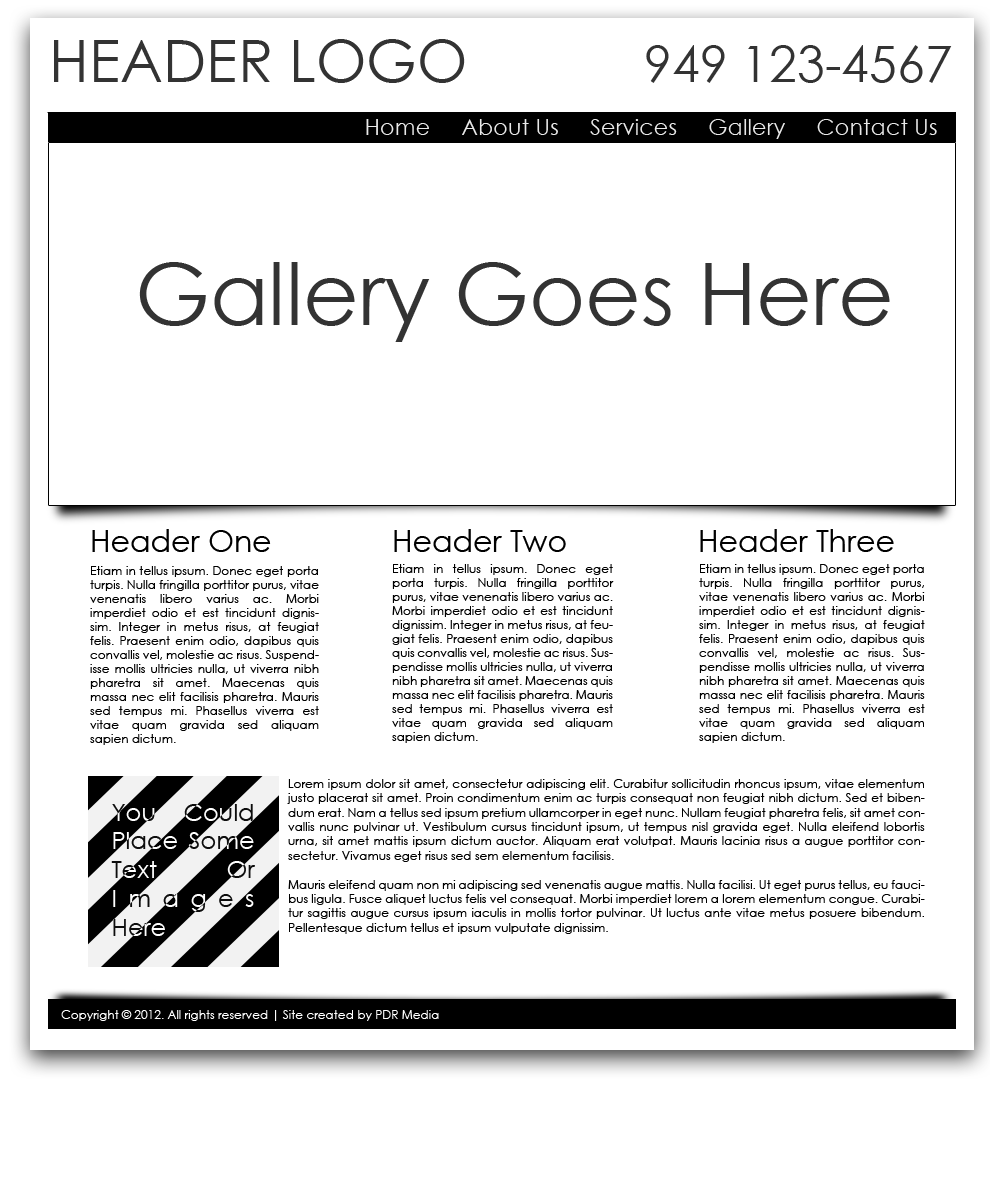
<style>
.page{position:relative;width:990px;height:1200px;background:#ffffff}
.page>*{position:absolute;margin:0}
.t1{font:58.2px "CenturyGothic";color:#333333}
.t2{font:50.1px "CenturyGothic";color:#333333}
.t3{font:22.4px "CenturyGothic";color:#e9e9e9}
.t4{font:85.8px "CenturyGothic";color:#333333}
.t5{font:30px "CenturyGothic";color:#000000}
.t6{font:12px/14px "CenturyGothic";color:#000000}
.t7{font:12px "CenturyGothic";color:#000000}
.t8{font:12px "CenturyGothic";color:#ffffff}
</style>
<div class="page">
<p class="t1" style="left:54px;top:39px;width:411px;height:44px">HEADER LOGO</p>
<p class="t2" style="left:646px;top:45px;width:306px;height:38px">949 123-4567</p>
<p class="t3" style="left:366px;top:119px;width:571px;height:20px">Home     About Us     Services     Gallery     Contact Us</p>
<p class="t4" style="left:139px;top:262px;width:751px;height:80px">Gallery Goes Here</p>
<p class="t5" style="left:92px;top:529px;width:179px;height:23px">Header One</p>
<p class="t5" style="left:394px;top:529px;width:172px;height:23px">Header Two</p>
<p class="t5" style="left:700px;top:529px;width:194px;height:23px">Header Three</p>
<p class="t6" style="left:90px;top:566px;width:229px;height:179px;text-align:justify">Etiam in tellus ipsum. Donec eget porta turpis. Nulla fringilla porttitor purus, vitae venenatis libero varius ac. Morbi imperdiet odio et est tincidunt dignissim. Integer in metus risus, at feugiat felis. Praesent enim odio, dapibus quis convallis vel, molestie ac risus. Suspendisse mollis ultricies nulla, ut viverra nibh pharetra sit amet. Maecenas quis massa nec elit facilisis pharetra. Mauris sed tempus mi. Phasellus viverra est vitae quam gravida sed aliquam sapien dictum.</p>
<p class="t6" style="left:392px;top:564px;width:222px;height:179px;text-align:justify">Etiam in tellus ipsum. Donec eget porta turpis. Nulla fringilla porttitor purus, vitae venenatis libero varius ac. Morbi imperdiet odio et est tincidunt dignissim. Integer in metus risus, at feugiat felis. Praesent enim odio, dapibus quis convallis vel, molestie ac risus. Suspendisse mollis ultricies nulla, ut viverra nibh pharetra sit amet. Maecenas quis massa nec elit facilisis pharetra. Mauris sed tempus mi. Phasellus viverra est vitae quam gravida sed aliquam sapien dictum.</p>
<p class="t6" style="left:699px;top:564px;width:226px;height:179px;text-align:justify">Etiam in tellus ipsum. Donec eget porta turpis. Nulla fringilla porttitor purus, vitae venenatis libero varius ac. Morbi imperdiet odio et est tincidunt dignissim. Integer in metus risus, at feugiat felis. Praesent enim odio, dapibus quis convallis vel, molestie ac risus. Suspendisse mollis ultricies nulla, ut viverra nibh pharetra sit amet. Maecenas quis massa nec elit facilisis pharetra. Mauris sed tempus mi. Phasellus viverra est vitae quam gravida sed aliquam sapien dictum.</p>
<p class="t7" style="left:287px;top:779px;width:638px;height:155px;text-align:justify">Lorem ipsum dolor sit amet, consectetur adipiscing elit. Curabitur sollicitudin rhoncus ipsum, vitae elementum justo placerat sit amet. Proin condimentum enim ac turpis consequat non feugiat nibh dictum. Sed et bibendum erat. Nam a tellus sed ipsum pretium ullamcorper in eget nunc. Nullam feugiat pharetra felis, sit amet convallis nunc pulvinar ut. Vestibulum cursus tincidunt ipsum, ut tempus nisl gravida eget. Nulla eleifend lobortis urna, sit amet mattis ipsum dictum auctor. Aliquam erat volutpat. Mauris lacinia risus a augue porttitor consectetur. Vivamus eget risus sed sem elementum facilisis.<br><br>Mauris eleifend quam non mi adipiscing sed venenatis augue mattis. Nulla facilisi. Ut eget purus tellus, eu faucibus ligula. Fusce aliquet luctus felis vel consequat. Morbi imperdiet lorem a lorem elementum congue. Curabitur sagittis augue cursus ipsum iaculis in mollis tortor pulvinar. Ut luctus ante vitae metus posuere bibendum. Pellentesque dictum tellus et ipsum vulputate dignissim.</p>
<p class="t8" style="left:61px;top:1010px;width:378px;height:11px">Copyright © 2012. All rights reserved | Site created by PDR Media</p>
</div>
